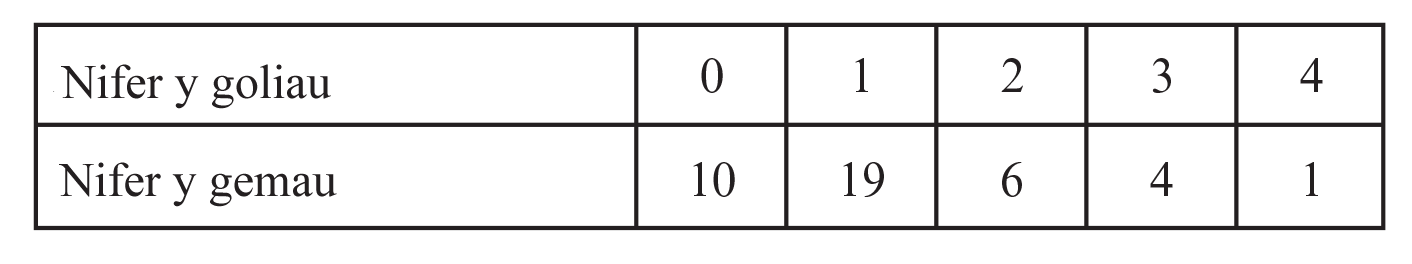
<style>
.page{position:relative;width:1412px;height:264px;background:#ffffff}
.page>*{position:absolute;margin:0}
.t1{font:48px "TimesNewRomanPSMT";color:#231f20}
</style>
<div class="page">
<p class="t1" style="left:61px;top:64px;width:270px;height:45px">Nifer y goliau</p>
<p class="t1" style="left:59px;top:162px;width:278px;height:45px">Nifer y gemau</p>
</div>
